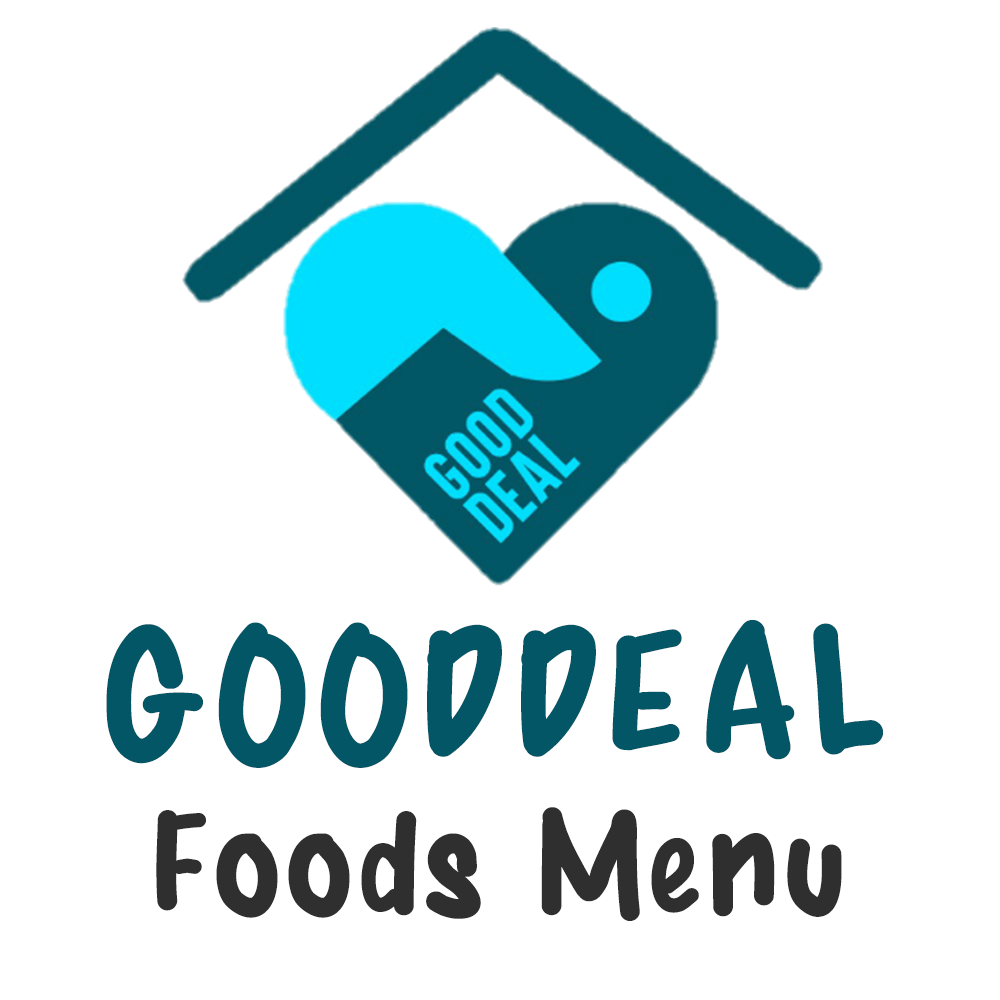
<style>
.page{position:relative;width:1000px;height:1000px;background:#ffffff}
.page>*{position:absolute;margin:0}
.t1{font:174.1px "BestMarker";color:#035666}
.t2{font:140px "BestMarker";color:#2f2f2f}
</style>
<div class="page">
<p class="t1" style="left:106px;top:620px;width:777px;height:148px">GOODDEAL</p>
<p class="t2" style="left:156px;top:807px;width:686px;height:114px">Foods Menu</p>
</div>
